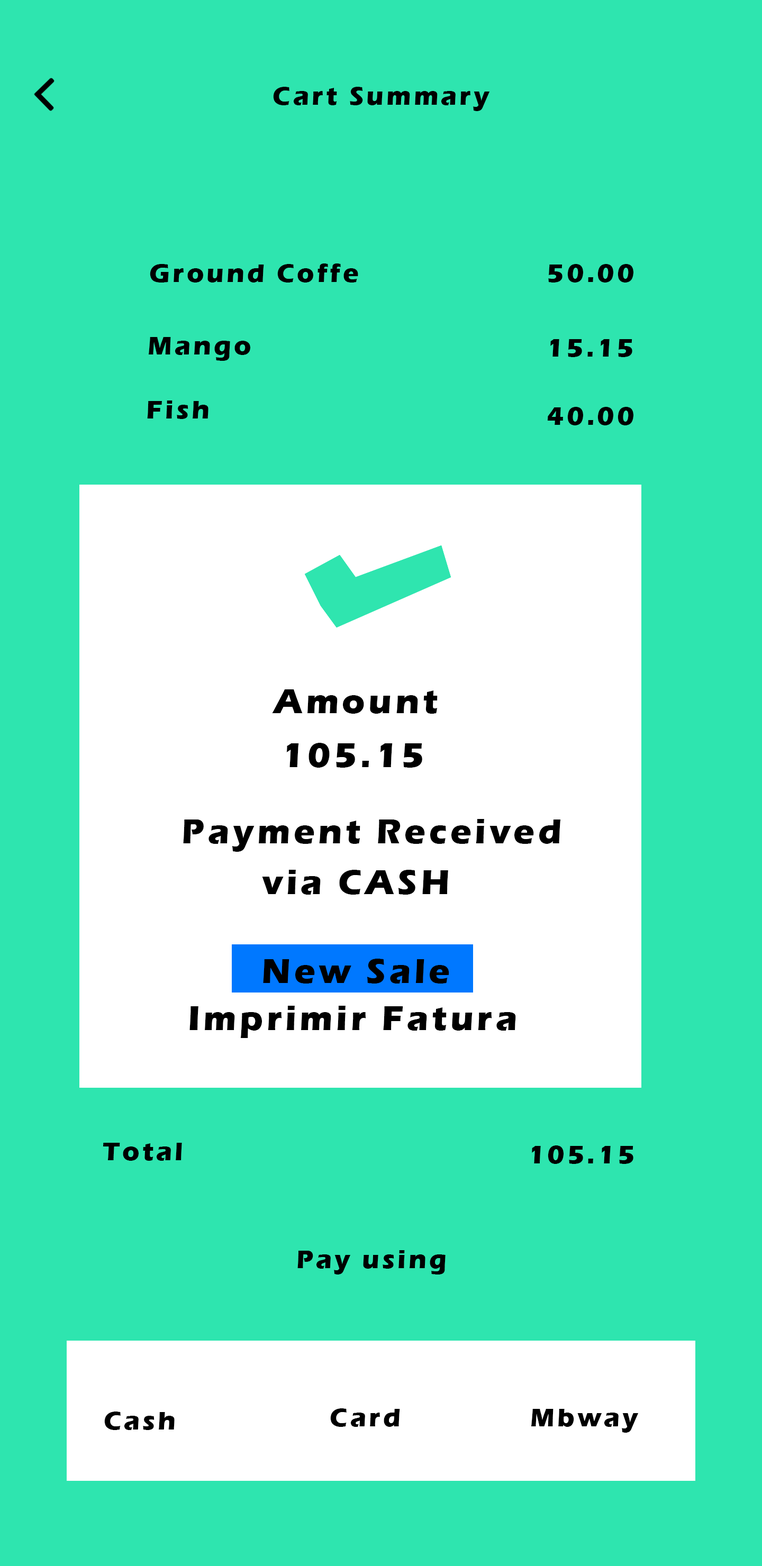
<style>
.page{position:relative;width:762px;height:1566px;background:#2ee5af}
.page>*{position:absolute;margin:0}
.t1{font:26.4px "ErasITC-Bold";letter-spacing:0.1em;color:#000000}
.t2{font:35.3px "ErasITC-Bold";letter-spacing:0.1em;color:#000000}
</style>
<div class="page">
<p class="t1" style="left:273px;top:87px;width:217px;height:24px">Cart Summary</p>
<p class="t1" style="left:150px;top:263px;width:208px;height:19px">Ground Coffe</p>
<p class="t1" style="left:548px;top:264px;width:85px;height:18px">50.00</p>
<p class="t1" style="left:148px;top:337px;width:102px;height:24px">Mango</p>
<p class="t1" style="left:550px;top:339px;width:82px;height:18px">15.15</p>
<p class="t1" style="left:147px;top:400px;width:61px;height:19px">Fish</p>
<p class="t1" style="left:547px;top:407px;width:86px;height:18px">40.00</p>
<p class="t2" style="left:272px;top:689px;width:165px;height:25px">Amount</p>
<p class="t2" style="left:286px;top:743px;width:136px;height:24px">105.15</p>
<p class="t2" style="left:183px;top:819px;width:378px;height:33px">Payment Received</p>
<p class="t2" style="left:262px;top:870px;width:186px;height:24px">via CASH</p>
<p class="t2" style="left:263px;top:958px;width:186px;height:25px">New Sale</p>
<p class="t2" style="left:189px;top:1005px;width:327px;height:33px">Imprimir Fatura</p>
<p class="t1" style="left:103px;top:1142px;width:79px;height:18px">Total</p>
<p class="t1" style="left:532px;top:1145px;width:101px;height:19px">105.15</p>
<p class="t1" style="left:297px;top:1250px;width:148px;height:24px">Pay using</p>
<p class="t1" style="left:330px;top:1408px;width:70px;height:18px">Card</p>
<p class="t1" style="left:531px;top:1409px;width:107px;height:23px">Mbway</p>
<p class="t1" style="left:104px;top:1411px;width:71px;height:19px">Cash</p>
</div>
